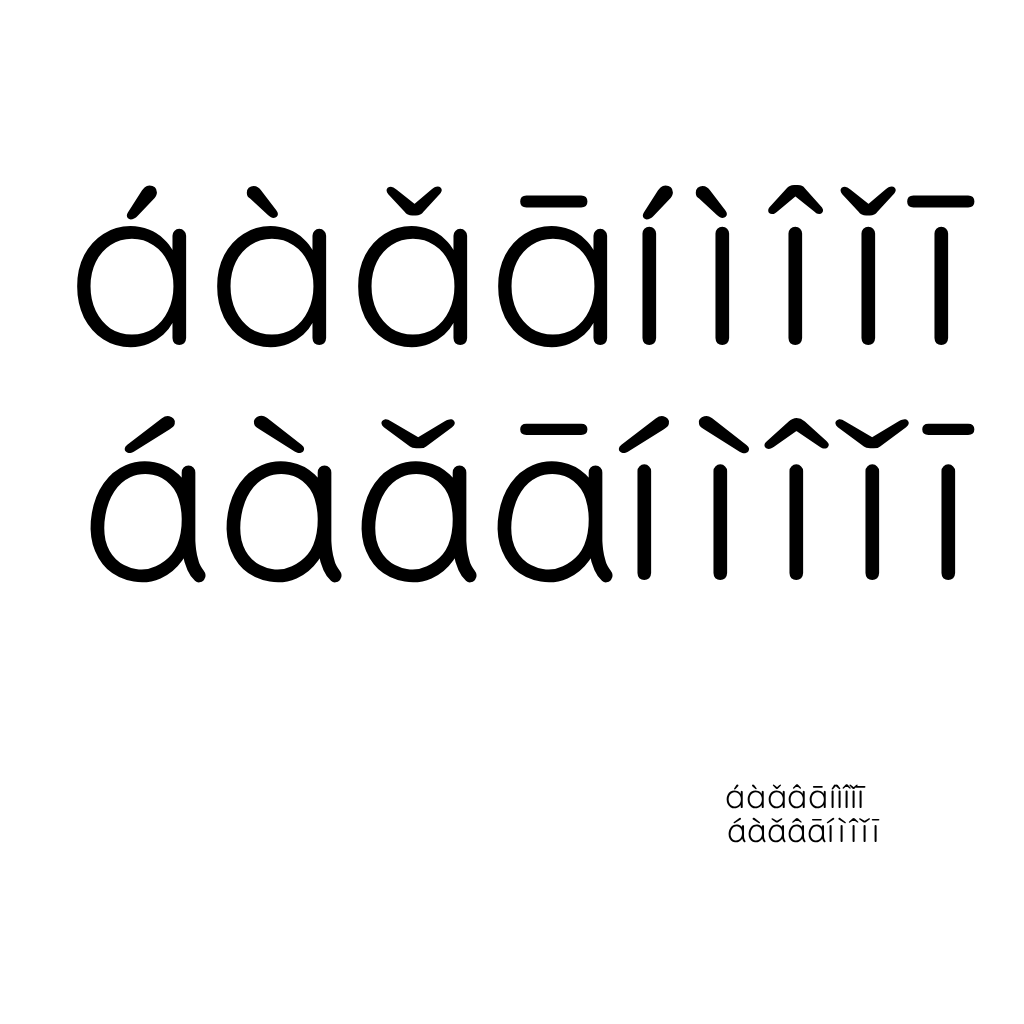
<style>
.page{position:relative;width:1024px;height:1024px;background:#ffffff}
.page>*{position:absolute;margin:0}
.t1{font:227.6px "Quicksand-Regular";color:#000000}
.t2{font:227.6px "ToneOZ-Quicksnow-Regular";color:#000000}
.t3{font:33.6px "Quicksand-Regular";color:#000000}
.t4{font:33.6px "ToneOZ-Quicksnow-Regular";color:#000000}
</style>
<div class="page">
<p class="t1" style="left:77px;top:184px;width:898px;height:164px">áàǎāí ì î ǐ ī</p>
<p class="t2" style="left:90px;top:415px;width:885px;height:168px">áàǎāíìîǐī</p>
<p class="t3" style="left:726px;top:784px;width:140px;height:25px">áàǎâāíìîǐī</p>
<p class="t4" style="left:728px;top:817px;width:152px;height:26px">áàǎâāíìîǐī</p>
</div>
